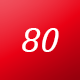
<style>
.page{position:relative;width:80px;height:80px}
.page>*{position:absolute;margin:0}
.t1{font:36px "Cambria-Italic";color:#ffffff}
</style>
<div class="page">
<p class="t1" style="left:22px;top:28px;width:37px;height:24px">80</p>
</div>
